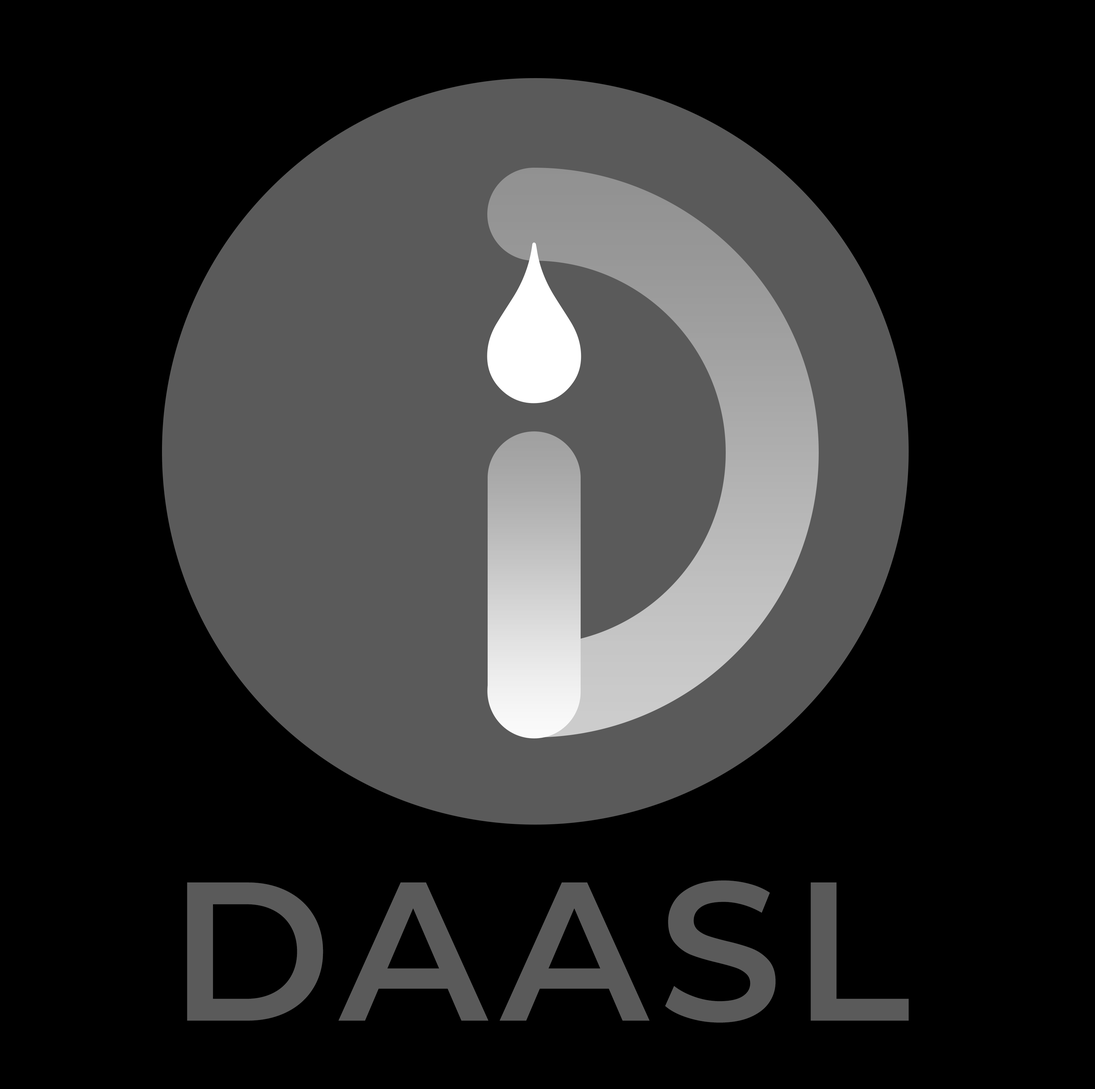
<style>
.page{position:relative;width:1095px;height:1089px;background:#000000}
.page>*{position:absolute;margin:0}
.t1{font:197.2px "Montserrat-SemiBold";letter-spacing:0.05em;color:#5a5a5a;text-transform:uppercase}
</style>
<div class="page">
<p class="t1" style="left:187px;top:880px;width:722px;height:143px">dAasl</p>
</div>
